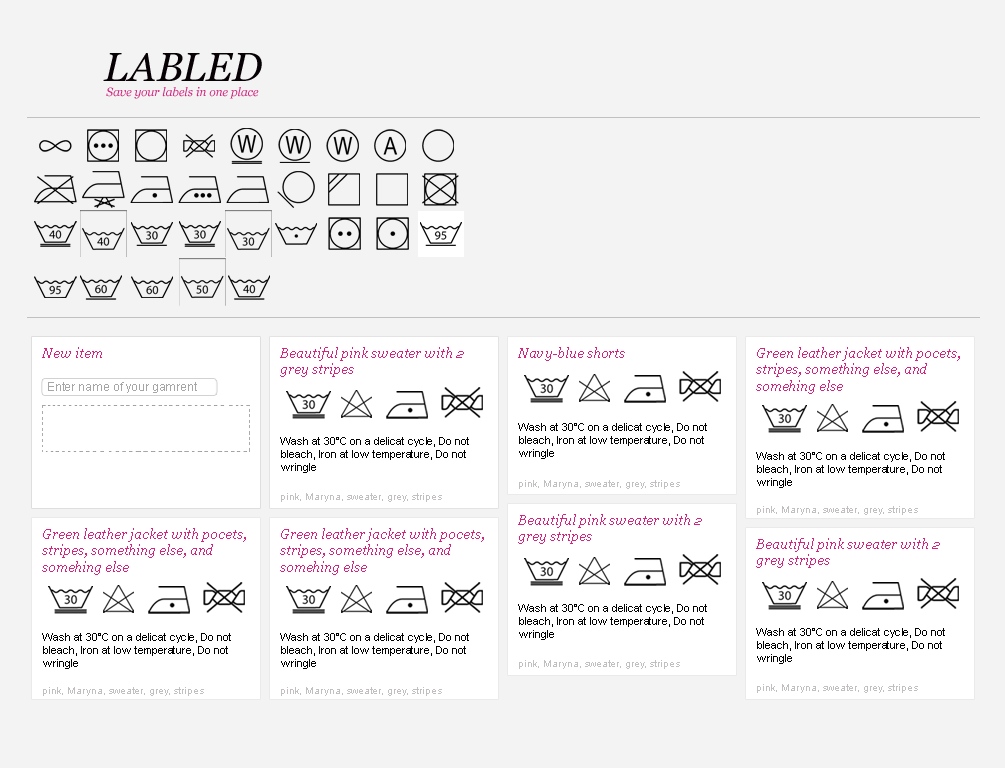
<style>
.page{position:relative;width:1005px;height:768px;background:#f3f3f3}
.page>*{position:absolute;margin:0}
.t1{font:40.3px "Georgia-Italic";color:#070004}
.t2{font:12px "Georgia-Italic";color:#d3247e}
.t3{font:14px "Georgia-Italic";color:#d3247e}
.t4{font:12px "ArialMT";color:#a6a6a6}
.t5{font:11px "ArialMT";color:#010101}
.t6{font:10px "ArialMT";color:#c1bfc0}
</style>
<div class="page">
<p class="t1" style="left:103px;top:53px;width:159px;height:28px">LABLED</p>
<p class="t2" style="left:106px;top:87px;width:153px;height:12px">Save your labels in one place</p>
<p class="t3" style="left:42px;top:347px;width:60px;height:11px">New item</p>
<p class="t3" style="left:280px;top:347px;width:184px;height:30px">Beautiful pink sweater with 2 grey stripes</p>
<p class="t3" style="left:518px;top:347px;width:107px;height:14px">Navy-blue shorts</p>
<p class="t3" style="left:756px;top:347px;width:204px;height:47px">Green leather jacket with pocets, stripes, something else, and somehing else</p>
<p class="t4" style="left:48px;top:382px;width:149px;height:11px">Enter name of your gamrent</p>
<p class="t5" style="left:518px;top:423px;width:189px;height:36px">Wash at 30°C on a delicat cycle, Do not bleach, Iron at low temperature, Do not wringle</p>
<p class="t5" style="left:280px;top:437px;width:189px;height:36px">Wash at 30°C on a delicat cycle, Do not bleach, Iron at low temperature, Do not wringle</p>
<p class="t5" style="left:756px;top:452px;width:189px;height:36px">Wash at 30°C on a delicat cycle, Do not bleach, Iron at low temperature, Do not wringle</p>
<p class="t6" style="left:519px;top:480px;width:161px;height:9px">pink, Maryna, sweater, grey, stripes</p>
<p class="t6" style="left:281px;top:493px;width:161px;height:9px">pink, Maryna, sweater, grey, stripes</p>
<p class="t6" style="left:757px;top:506px;width:161px;height:9px">pink, Maryna, sweater, grey, stripes</p>
<p class="t3" style="left:518px;top:514px;width:184px;height:30px">Beautiful pink sweater with 2 grey stripes</p>
<p class="t3" style="left:42px;top:528px;width:204px;height:47px">Green leather jacket with pocets, stripes, something else, and somehing else</p>
<p class="t3" style="left:280px;top:528px;width:204px;height:47px">Green leather jacket with pocets, stripes, something else, and somehing else</p>
<p class="t3" style="left:756px;top:538px;width:184px;height:30px">Beautiful pink sweater with 2 grey stripes</p>
<p class="t5" style="left:518px;top:604px;width:189px;height:36px">Wash at 30°C on a delicat cycle, Do not bleach, Iron at low temperature, Do not wringle</p>
<p class="t5" style="left:756px;top:628px;width:189px;height:36px">Wash at 30°C on a delicat cycle, Do not bleach, Iron at low temperature, Do not wringle</p>
<p class="t5" style="left:42px;top:633px;width:189px;height:36px">Wash at 30°C on a delicat cycle, Do not bleach, Iron at low temperature, Do not wringle</p>
<p class="t5" style="left:280px;top:633px;width:189px;height:36px">Wash at 30°C on a delicat cycle, Do not bleach, Iron at low temperature, Do not wringle</p>
<p class="t6" style="left:519px;top:660px;width:161px;height:9px">pink, Maryna, sweater, grey, stripes</p>
<p class="t6" style="left:43px;top:687px;width:161px;height:9px">pink, Maryna, sweater, grey, stripes</p>
<p class="t6" style="left:281px;top:687px;width:161px;height:9px">pink, Maryna, sweater, grey, stripes</p>
<p class="t6" style="left:757px;top:684px;width:161px;height:9px">pink, Maryna, sweater, grey, stripes</p>
</div>
